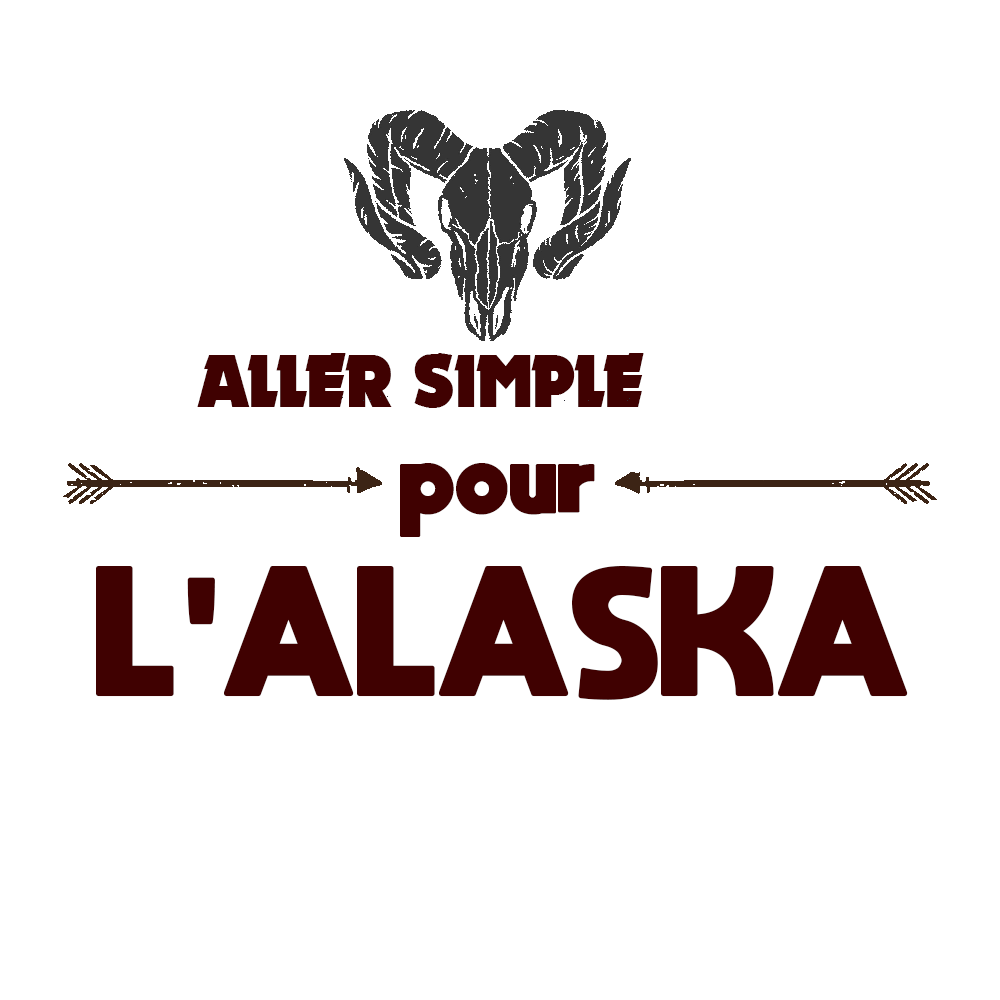
<style>
.page{position:relative;width:1000px;height:1000px;background:#ffffff}
.page>*{position:absolute;margin:0}
.t1{font:72px "November";color:#400101}
.t2{font:72px "moon_get-Heavy";color:#400101}
.t3{font:130px "moon_get-Heavy";color:#400101}
</style>
<div class="page">
<p class="t1" style="left:197px;top:353px;width:447px;height:55px">ALLER SIMPLE</p>
<p class="t2" style="left:400px;top:463px;width:195px;height:74px">pour</p>
<p class="t3" style="left:96px;top:566px;width:812px;height:134px">L'ALASKA</p>
</div>
